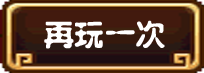
<style>
.page{position:relative;width:204px;height:73px}
.page>*{position:absolute;margin:0}
.t1{font:30px "FZSZJW--GB1-0";color:#ffffff;font-weight:bold}
</style>
<div class="page">
<p class="t1" style="left:44px;top:20px;width:121px;height:29px">再玩一次</p>
</div>
